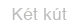
<style>
.page{position:relative;width:79px;height:27px;background:#ffffff}
.page>*{position:absolute;margin:0}
.t1{font:16.9px "Helvetica";letter-spacing:0.025em;color:#bdbfbc}
</style>
<div class="page">
<p class="t1" style="left:12px;top:8px;width:55px;height:12px">Két kút</p>
</div>
